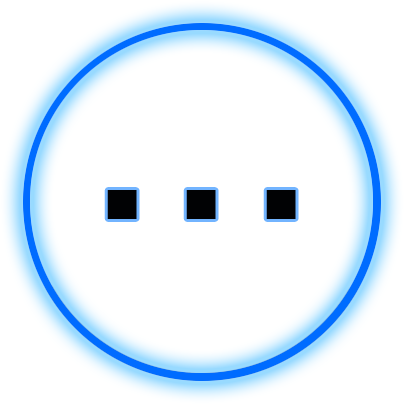
<style>
.page{position:relative;width:404px;height:404px;background:#ffffff}
.page>*{position:absolute;margin:0}
.t1{font:285.5px "ArialMT";color:#010204}
</style>
<div class="page">
<p class="t1" style="left:107px;top:190px;width:189px;height:29px">...</p>
</div>
